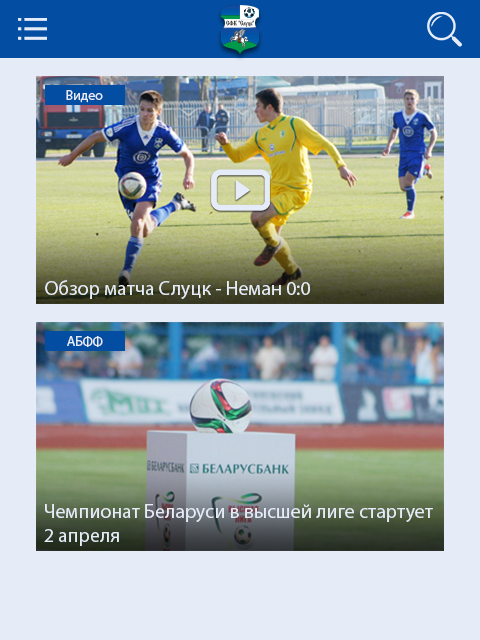
<style>
.page{position:relative;width:480px;height:640px;background:#e6ecf7}
.page>*{position:absolute;margin:0}
.t1{font:14px "MyriadPro-Regular";color:#e6ecf7}
.t2{font:20px "MyriadPro-Regular";color:#e6ecf7}
</style>
<div class="page">
<p class="t1" style="left:66px;top:90px;width:37px;height:13px">Видео</p>
<p class="t2" style="left:45px;top:280px;width:265px;height:19px">Обзор матча Слуцк - Неман 0:0</p>
<p class="t1" style="left:67px;top:336px;width:36px;height:11px">АБФФ</p>
<p class="t2" style="left:44px;top:504px;width:389px;height:42px">Чемпионат Беларуси в высшей лиге стартует<br>2 апреля</p>
</div>
